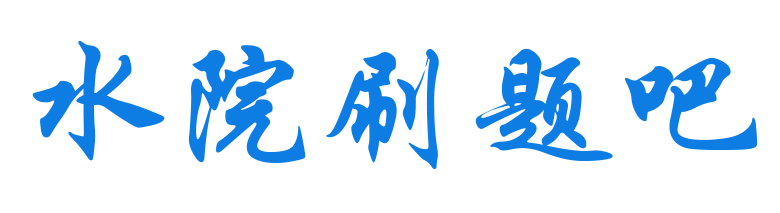
<style>
.page{position:relative;width:780px;height:213px;background:#ffffff}
.page>*{position:absolute;margin:0}
.t1{font:150px "STXingkai";color:#0d7de4}
</style>
<div class="page">
<p class="t1" style="left:32px;top:40px;width:726px;height:129px">水院刷题吧</p>
</div>
